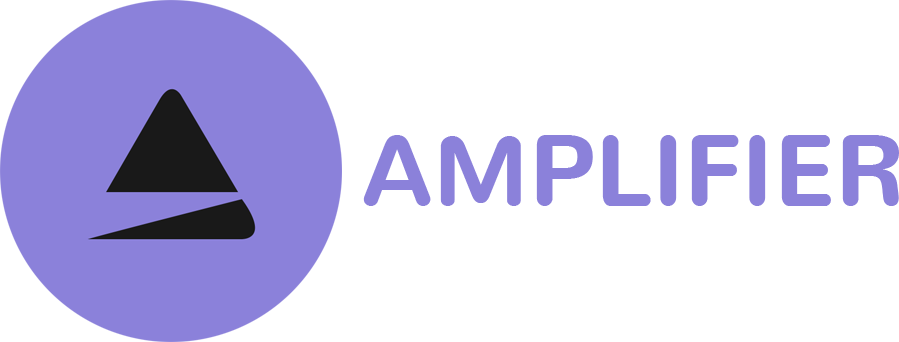
<style>
.page{position:relative;width:899px;height:342px;background:#ffffff}
.page>*{position:absolute;margin:0}
.t1{font:100px "Nunito-ExtraBold";color:#8b81da}
</style>
<div class="page">
<p class="t1" style="left:363px;top:135px;width:536px;height:71px">AMPLIFIER</p>
</div>
